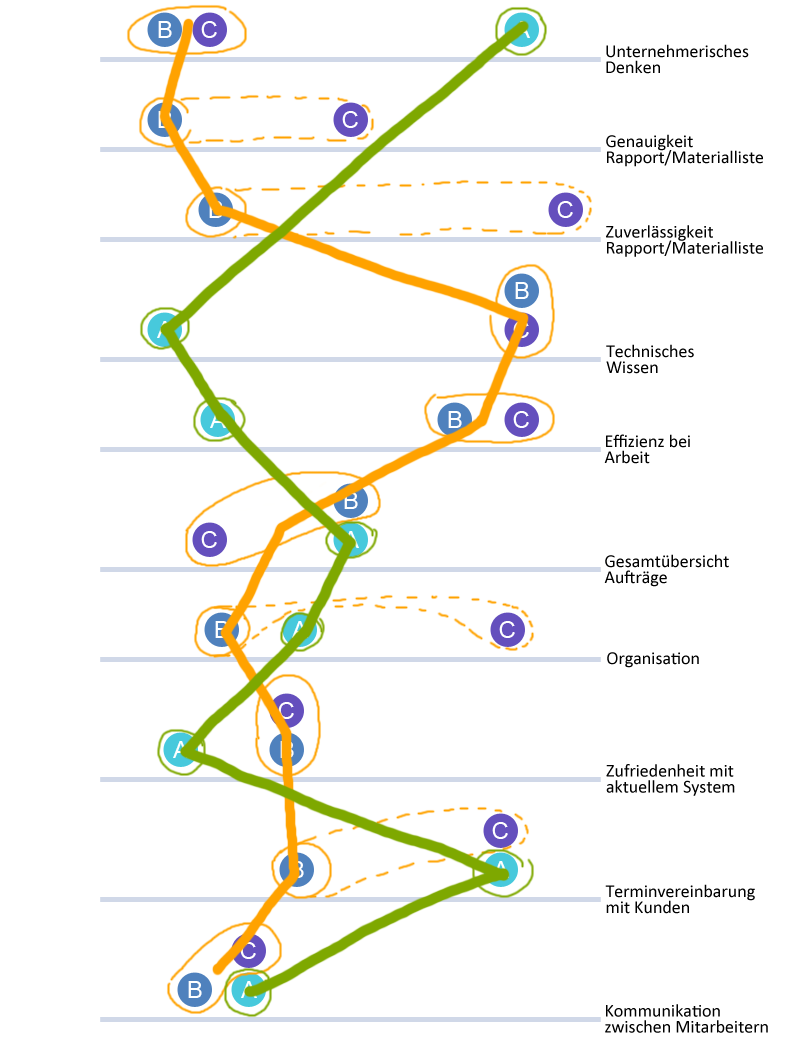
<style>
.page{position:relative;width:800px;height:1050px;background:#ffffff}
.page>*{position:absolute;margin:0}
.t1{font:18px/16px "Calibri";color:#000000}
.t2{font:18px "Calibri";color:#000000}
</style>
<div class="page">
<p class="t1" style="left:606px;top:44px;width:143px;height:30px">Unternehmerisches<br>Denken</p>
<p class="t1" style="left:606px;top:134px;width:157px;height:33px">Genauigkeit<br>Rapport/Materialliste</p>
<p class="t1" style="left:606px;top:225px;width:157px;height:32px">Zuverlässigkeit<br>Rapport/Materialliste</p>
<p class="t1" style="left:606px;top:344px;width:88px;height:30px">Technisches<br>Wissen</p>
<p class="t1" style="left:604px;top:434px;width:86px;height:30px">Effizienz bei<br>Arbeit</p>
<p class="t1" style="left:604px;top:554px;width:125px;height:33px">Gesamtübersicht<br>Aufträge</p>
<p class="t2" style="left:607px;top:652px;width:92px;height:16px">Organisation</p>
<p class="t1" style="left:606px;top:764px;width:129px;height:32px">Zufriedenheit mit<br>aktuellem System</p>
<p class="t1" style="left:605px;top:884px;width:150px;height:30px">Terminvereinbarung<br>mit Kunden</p>
<p class="t1" style="left:605px;top:1004px;width:163px;height:29px">Kommunikation<br>zwischen Mitarbeitern</p>
</div>
